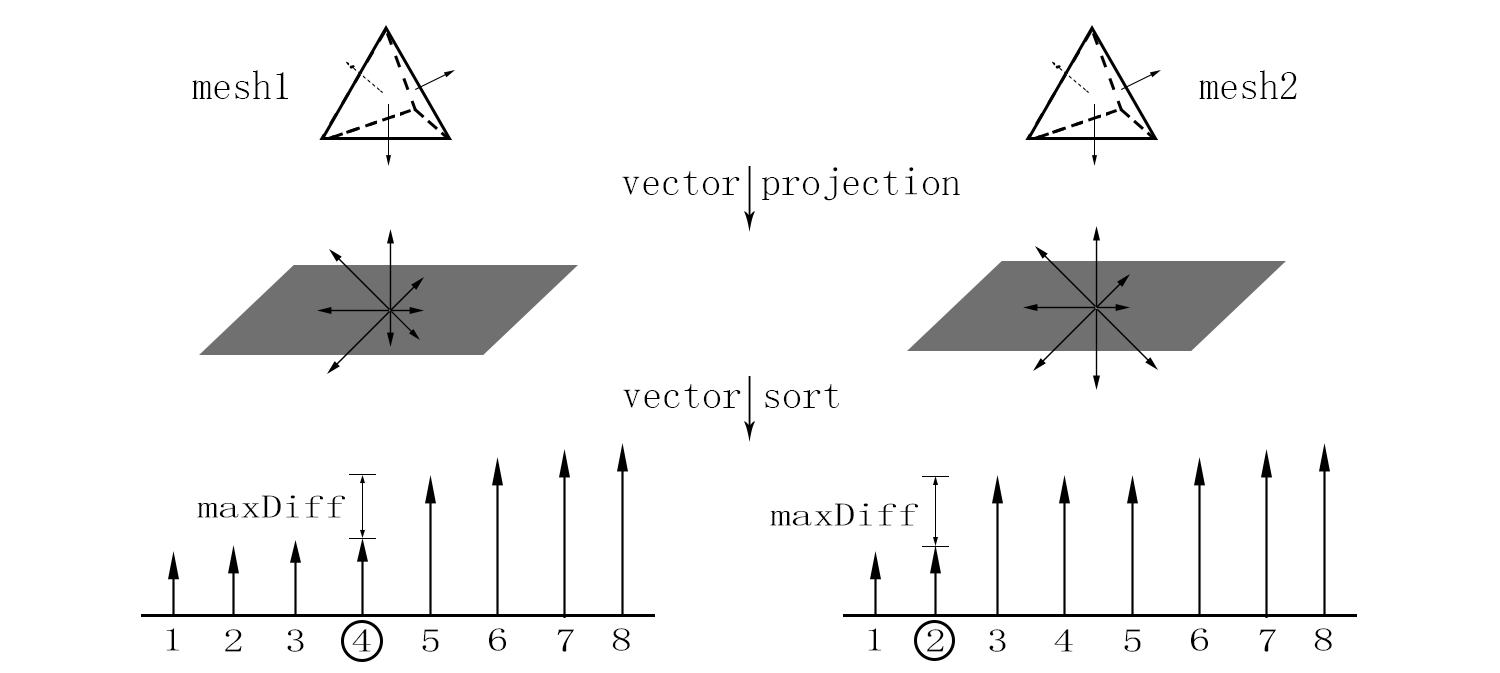
<style>
.page{position:relative;width:1500px;height:673px;background:#ffffff}
.page>*{position:absolute;margin:0}
.t1{font:40px "SimSun";color:#000000}
.t2{font:32.8px "SimSun";color:#000000;scale:1.3 1}
</style>
<div class="page">
<p class="t1" style="left:192px;top:70px;width:96px;height:29px">mesh1</p>
<p class="t1" style="left:1199px;top:70px;width:98px;height:29px">mesh2</p>
<p class="t1" style="left:622px;top:167px;width:338px;height:34px">vector projection</p>
<p class="t1" style="left:623px;top:384px;width:216px;height:24px">vector sort</p>
<p class="t2" style="left:197px;top:495px;width:148px;height:23px">maxDiff</p>
<p class="t2" style="left:770px;top:503px;width:148px;height:23px">maxDiff</p>
<p class="t2" style="left:166px;top:628px;width:13px;height:23px">1</p>
<p class="t2" style="left:225px;top:629px;width:17px;height:23px">2</p>
<p class="t2" style="left:287px;top:629px;width:17px;height:23px">3</p>
<p class="t2" style="left:352px;top:629px;width:19px;height:23px">4</p>
<p class="t2" style="left:422px;top:629px;width:17px;height:23px">5</p>
<p class="t2" style="left:489px;top:628px;width:17px;height:23px">6</p>
<p class="t2" style="left:557px;top:629px;width:17px;height:23px">7</p>
<p class="t2" style="left:612px;top:628px;width:18px;height:23px">8</p>
<p class="t2" style="left:868px;top:628px;width:13px;height:23px">1</p>
<p class="t2" style="left:927px;top:629px;width:17px;height:23px">2</p>
<p class="t2" style="left:989px;top:629px;width:17px;height:23px">3</p>
<p class="t2" style="left:1054px;top:629px;width:19px;height:23px">4</p>
<p class="t2" style="left:1124px;top:629px;width:17px;height:23px">5</p>
<p class="t2" style="left:1191px;top:628px;width:17px;height:23px">6</p>
<p class="t2" style="left:1259px;top:629px;width:17px;height:23px">7</p>
<p class="t2" style="left:1314px;top:628px;width:18px;height:23px">8</p>
</div>
